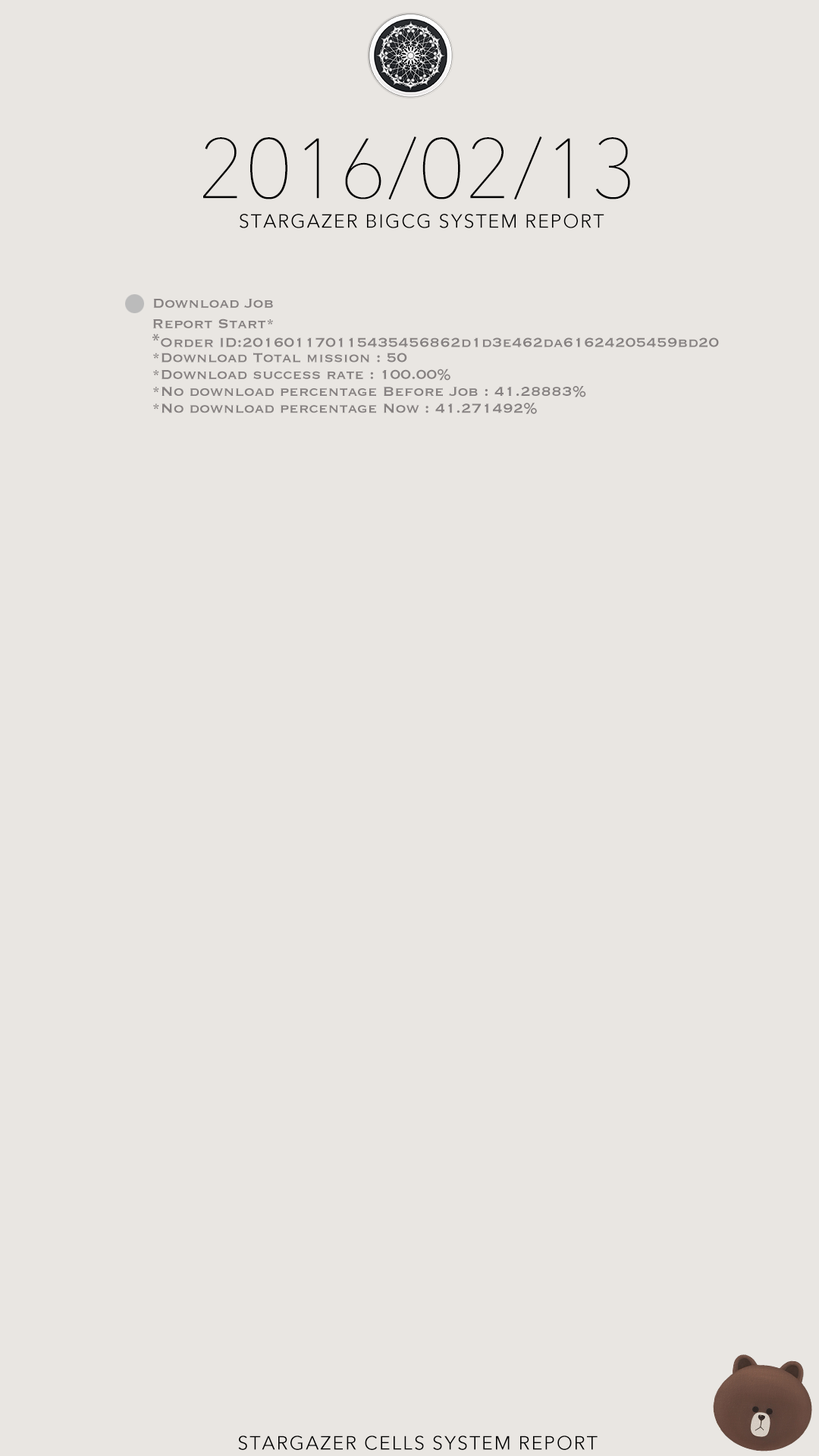
<style>
.page{position:relative;width:819px;height:1456px;background:#e9e6e2}
.page>*{position:absolute;margin:0}
.t1{font:84.3px "AvenirNext-UltraLight";color:#000000}
.t2{font:19px "AvenirNext-Regular";letter-spacing:0.075em;color:#000000}
.t3{font:16.9px "Copperplate";letter-spacing:0.005em;color:#868181}
.t4{font:16.9px/16.9px "Copperplate";letter-spacing:0.005em;color:#868181}
.t5{font:16.9px/16.9px "AdobeHeitiStd-Regular";letter-spacing:0.005em;color:#868181}
.t6{font:16.9px/16.9px "Copperplate";letter-spacing:0.005em;color:#bbbbbb}
</style>
<div class="page">
<p class="t1" style="left:203px;top:136px;width:427px;height:63px">2016/02/13</p>
<p class="t2" style="left:240px;top:214px;width:364px;height:14px">STARGAZER BIGCG SYSTEM REPORT</p>
<p class="t3" style="left:153px;top:299px;width:120px;height:9px">Download Job</p>
<p class="t4" style="left:152px;top:318px;width:567px;height:96px">Report Start*<br><span class="t5">*</span>Order ID:201601170115435456862d1d3e462da61624205459bd20<br>*Download Total mission : 50<br>*Download success rate : 100.00%<br>*No download percentage Before Job : 41.28883%<br>*No download percentage Now : 41.271492%<br><span class="t6">Report Over*</span></p>
<p class="t2" style="left:238px;top:1436px;width:360px;height:14px">STARGAZER CELLS SYSTEM REPORT</p>
</div>
